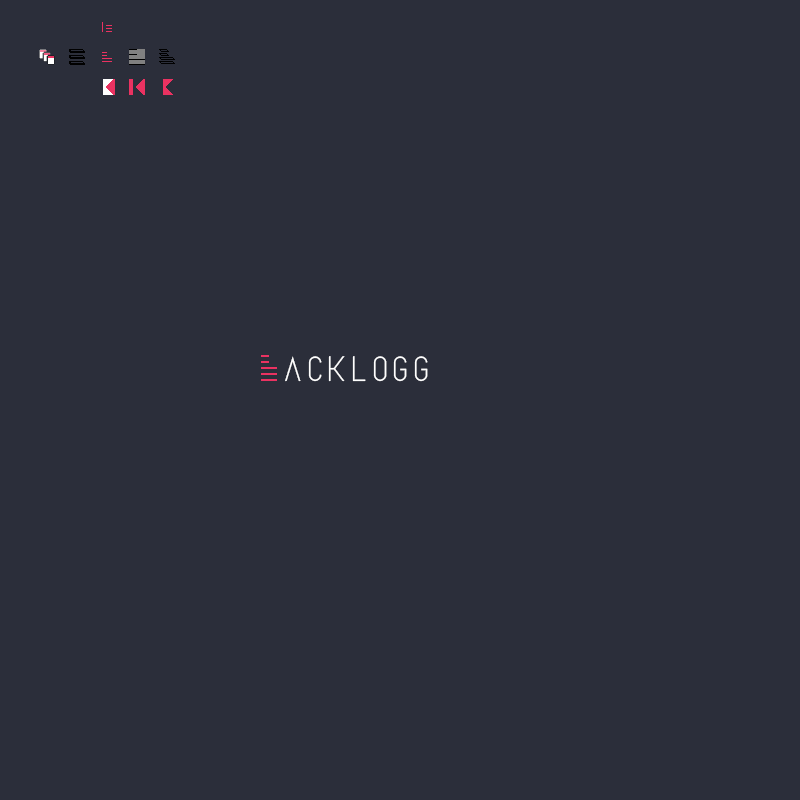
<style>
.page{position:relative;width:800px;height:800px;background:#2b2e3a}
.page>*{position:absolute;margin:0}
.t1{font:50px "Asgalt-Regular";letter-spacing:0.1em;color:#ffffff}
</style>
<div class="page">
<p class="t1" style="left:285px;top:356px;width:143px;height:26px">ACKLOGG</p>
</div>
